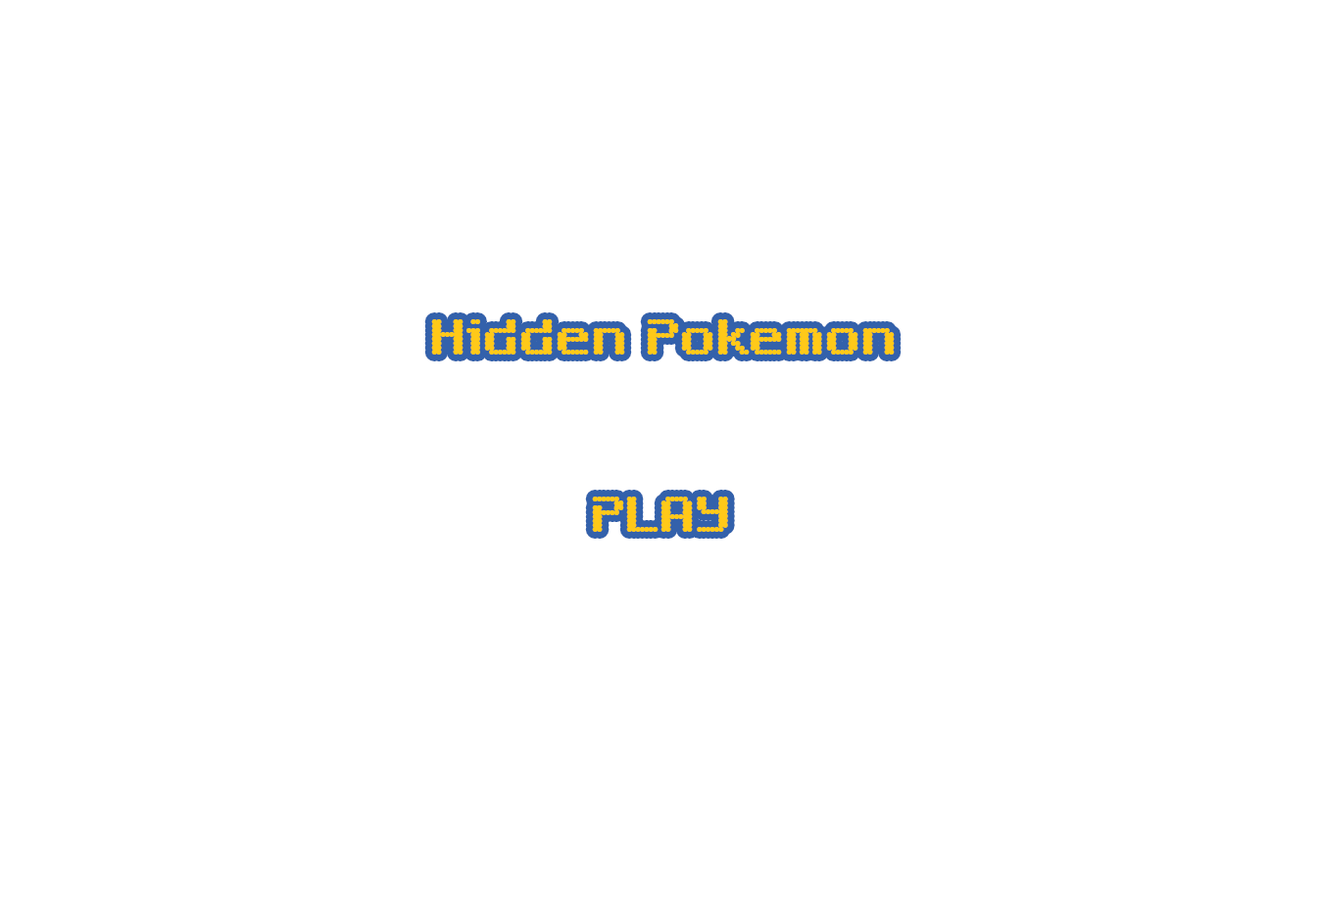
<style>
.page{position:relative;width:1320px;height:903px;background:#ffffff}
.page>*{position:absolute;margin:0}
.t1{font:53.9px "SixEightZeroNineChargen-Regular";color:#ffc919}
</style>
<div class="page">
<p class="t1" style="left:431px;top:319px;width:464px;height:36px">Hidden Pokemon</p>
<p class="t1" style="left:592px;top:497px;width:136px;height:35px">PLAY</p>
</div>
